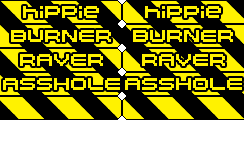
<style>
.page{position:relative;width:244px;height:144px;background:#000000}
.page>*{position:absolute;margin:0}
.t1{font:12px "04b20";color:#fff200}
</style>
<div class="page">
<p class="t1" style="left:23px;top:6px;width:76px;height:12px">hippie</p>
<p class="t1" style="left:145px;top:6px;width:76px;height:12px">hippie</p>
<p class="t1" style="left:11px;top:30px;width:100px;height:12px">BURNER</p>
<p class="t1" style="left:133px;top:30px;width:100px;height:12px">BURNER</p>
<p class="t1" style="left:20px;top:54px;width:83px;height:12px">RAVER</p>
<p class="t1" style="left:142px;top:54px;width:83px;height:12px">RAVER</p>
<p class="t1" style="left:3px;top:78px;width:117px;height:12px">ASSHOLE</p>
<p class="t1" style="left:125px;top:78px;width:117px;height:12px">ASSHOLE</p>
</div>
